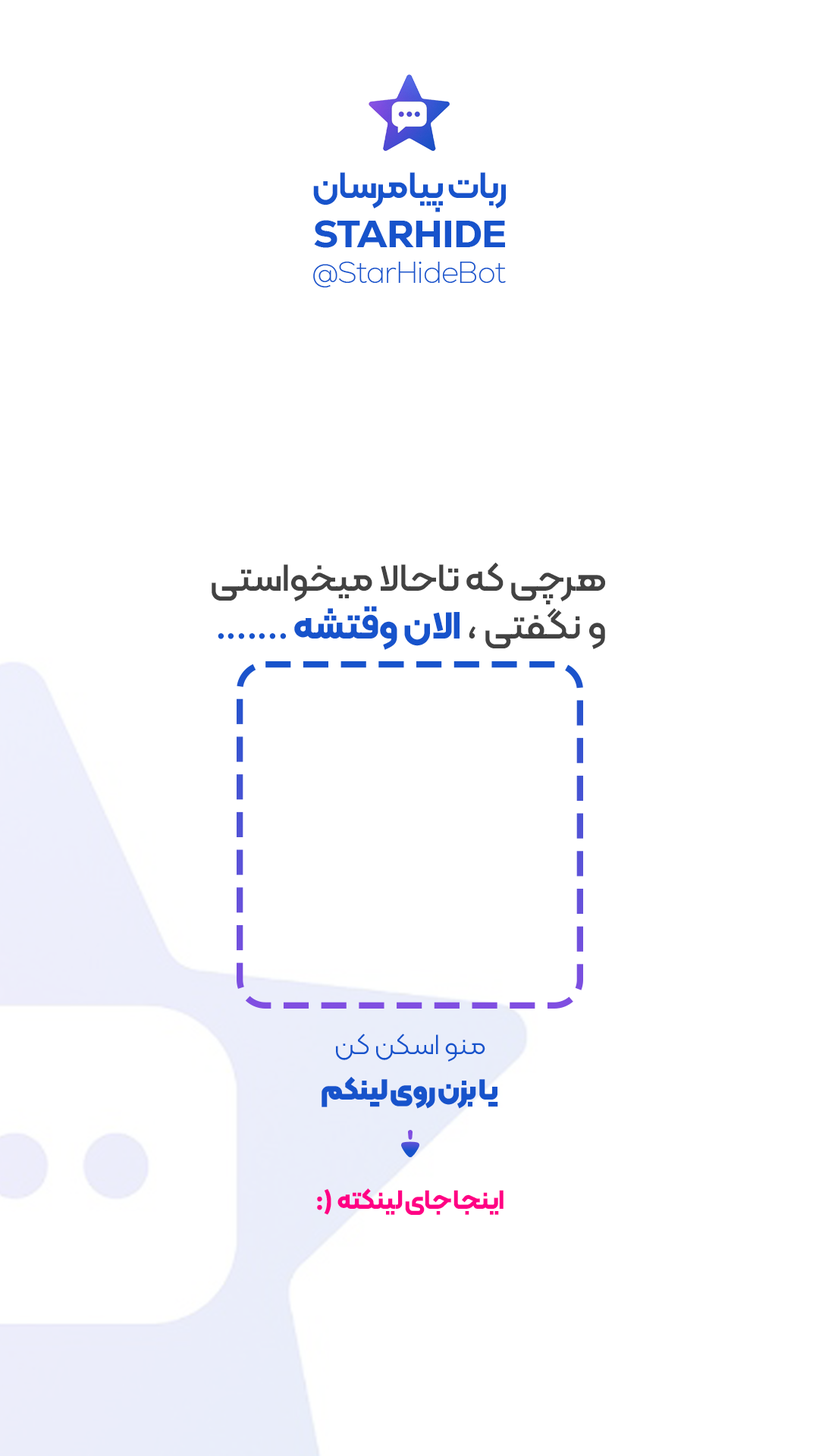
<style>
.page{position:relative;width:819px;height:1456px;background:#ffffff}
.page>*{position:absolute;margin:0}
.t1{font:37.9px "Kalameh-SemiBold";letter-spacing:-0.02em;color:#1753cb}
.t2{font:37.9px "Nexa-Heavy";letter-spacing:-0.02em;color:#1753cb}
.t3{font:29.6px "Nexa-ExtraLight";letter-spacing:-0.02em;color:#1753cb}
.t4{font:39.4px "Kalameh-Medium";letter-spacing:-0.02em;color:#424242}
.t5{font:39.4px "Kalameh-Medium";letter-spacing:-0.02em;color:#1753cb}
.t6{font:39.4px "Kalameh-Bold";letter-spacing:-0.02em;color:#1753cb}
.t7{font:29.6px "Kalameh-Light";letter-spacing:-0.02em;color:#1753cb}
.t8{font:29.6px "Kalameh-Black";letter-spacing:-0.02em;color:#1753cb}
.t9{font:27.3px "Kalameh-Bold";letter-spacing:-0.02em;color:#ff0084}
</style>
<div class="page">
<p class="t1" style="left:313px;top:172px;width:193px;height:40px">ربات پیامرسان</p>
<p class="t2" style="left:314px;top:220px;width:191px;height:28px">STARHIDE</p>
<p class="t3" style="left:313px;top:262px;width:193px;height:25px">@StarHideBot</p>
<p class="t4" style="left:212px;top:562px;width:393px;height:88px;text-align:right">هرچی که تاحالا میخواستی<br><span class="t5"> .......</span> و نگفتی ، <span class="t6">الان وقتشه</span></p>
<p class="t7" style="left:336px;top:1034px;width:149px;height:28px">منو اسکن کن</p>
<p class="t8" style="left:322px;top:1077px;width:176px;height:32px">یا بزن روی لینکم</p>
<p class="t9" style="left:317px;top:1189px;width:14px;height:26px">:)</p>
<p class="t9" style="left:337px;top:1188px;width:167px;height:27px">اینجا جای لینکته</p>
</div>
